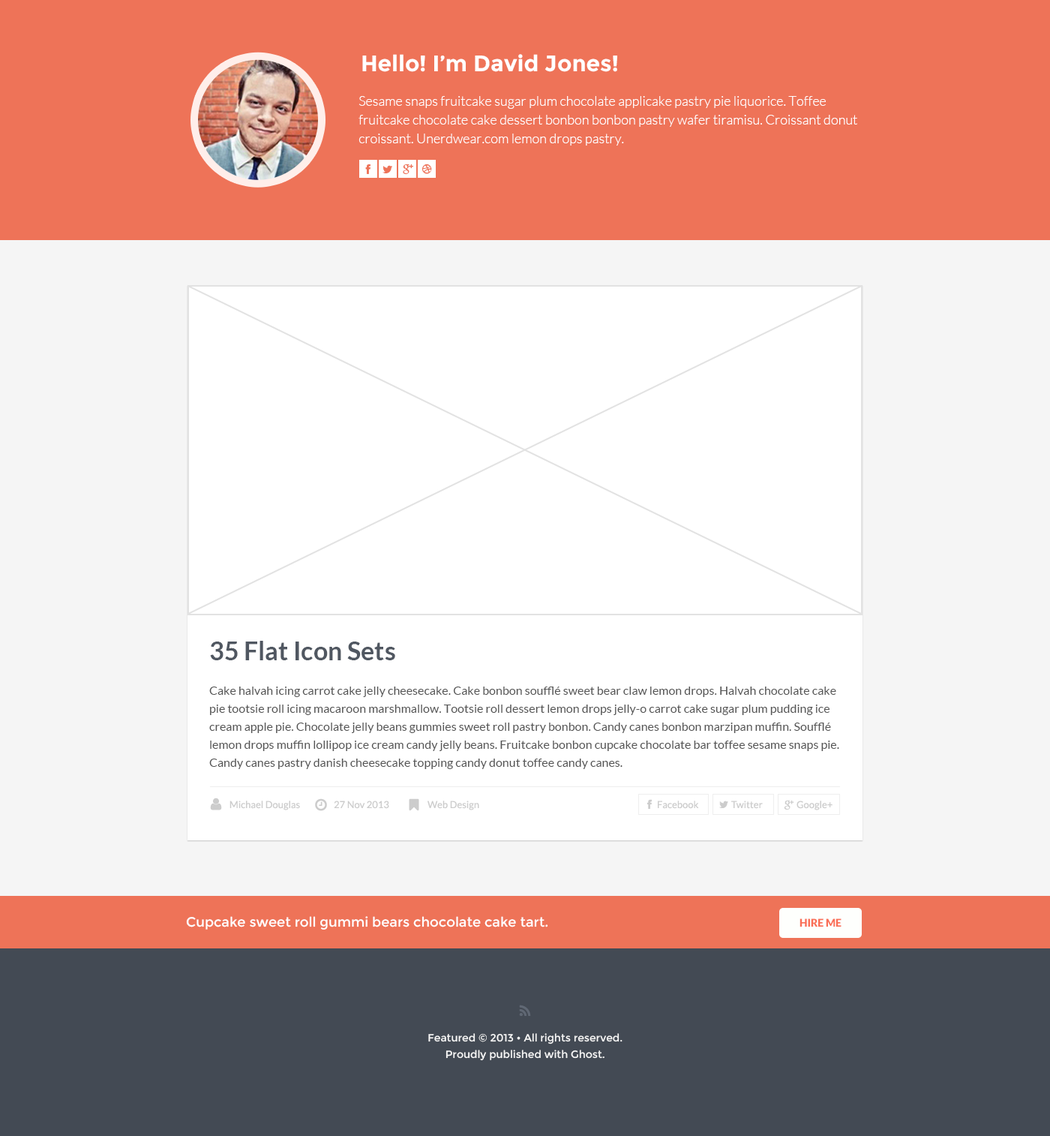
<style>
.page{position:relative;width:1050px;height:1136px;background:#ffffff}
.page>*{position:absolute;margin:0}
.t1{font:22.5px "Montserrat-Bold";color:#ffffff}
.t2{font:13.5px/18.8px "Lato-Light";color:#ffffff}
.t3{font:25.5px "Lato-Bold";color:#505761}
.t4{font:12px/18px "Lato-Regular";color:#555555}
.t5{font:9.8px "Lato-Regular";color:#cccccc}
.t6{font:13.5px "Montserrat-Regular";color:#ffffff}
.t7{font:10.5px "Lato-Black";color:#fa6f57;text-transform:uppercase}
.t8{font:10.5px/16.5px "Montserrat-Regular";color:#f7f7f7}
</style>
<div class="page">
<p class="t1" style="left:362px;top:54px;width:255px;height:18px">Hello! I’m David Jones!</p>
<p class="t2" style="left:359px;top:96px;width:498px;height:50px">Sesame snaps fruitcake sugar plum chocolate applicake pastry pie liquorice. Toffee fruitcake chocolate cake dessert bonbon bonbon pastry wafer tiramisu. Croissant donut croissant. Unerdwear.com lemon drops pastry.</p>
<p class="t3" style="left:210px;top:641px;width:185px;height:19px">35 Flat Icon Sets</p>
<p class="t4" style="left:209px;top:686px;width:630px;height:83px">Cake halvah icing carrot cake jelly cheesecake. Cake bonbon soufflé sweet bear claw lemon drops. Halvah chocolate cake pie tootsie roll icing macaroon marshmallow. Tootsie roll dessert lemon drops jelly-o carrot cake sugar plum pudding ice cream apple pie. Chocolate jelly beans gummies sweet roll pastry bonbon. Candy canes bonbon marzipan muffin. Soufflé lemon drops muffin lollipop ice cream candy jelly beans. Fruitcake bonbon cupcake chocolate bar toffee sesame snaps pie. Candy canes pastry danish cheesecake topping candy donut toffee candy canes.</p>
<p class="t5" style="left:230px;top:800px;width:70px;height:10px">Michael Douglas</p>
<p class="t5" style="left:334px;top:800px;width:55px;height:9px">27 Nov 2013</p>
<p class="t5" style="left:428px;top:800px;width:51px;height:10px">Web Design</p>
<p class="t5" style="left:658px;top:800px;width:41px;height:9px">Facebook</p>
<p class="t5" style="left:731px;top:800px;width:32px;height:9px">Twitter</p>
<p class="t5" style="left:797px;top:800px;width:36px;height:10px">Google+</p>
<p class="t6" style="left:186px;top:916px;width:362px;height:13px">Cupcake sweet roll gummi bears chocolate cake tart.</p>
<p class="t7" style="left:800px;top:918px;width:42px;height:8px">Hire Me</p>
<p class="t8" style="left:428px;top:1033px;width:195px;height:28px;text-align:center">Featured © 2013 • All rights reserved.<br>Proudly published with Ghost.</p>
</div>
